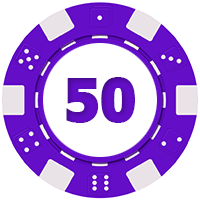
<style>
.page{position:relative;width:200px;height:200px;background:#ffffff}
.page>*{position:absolute;margin:0}
.t1{font:60px "VerdanaPro-CondBlack";color:#640ec8}
</style>
<div class="page">
<p class="t1" style="left:66px;top:77px;width:69px;height:46px">50</p>
</div>
